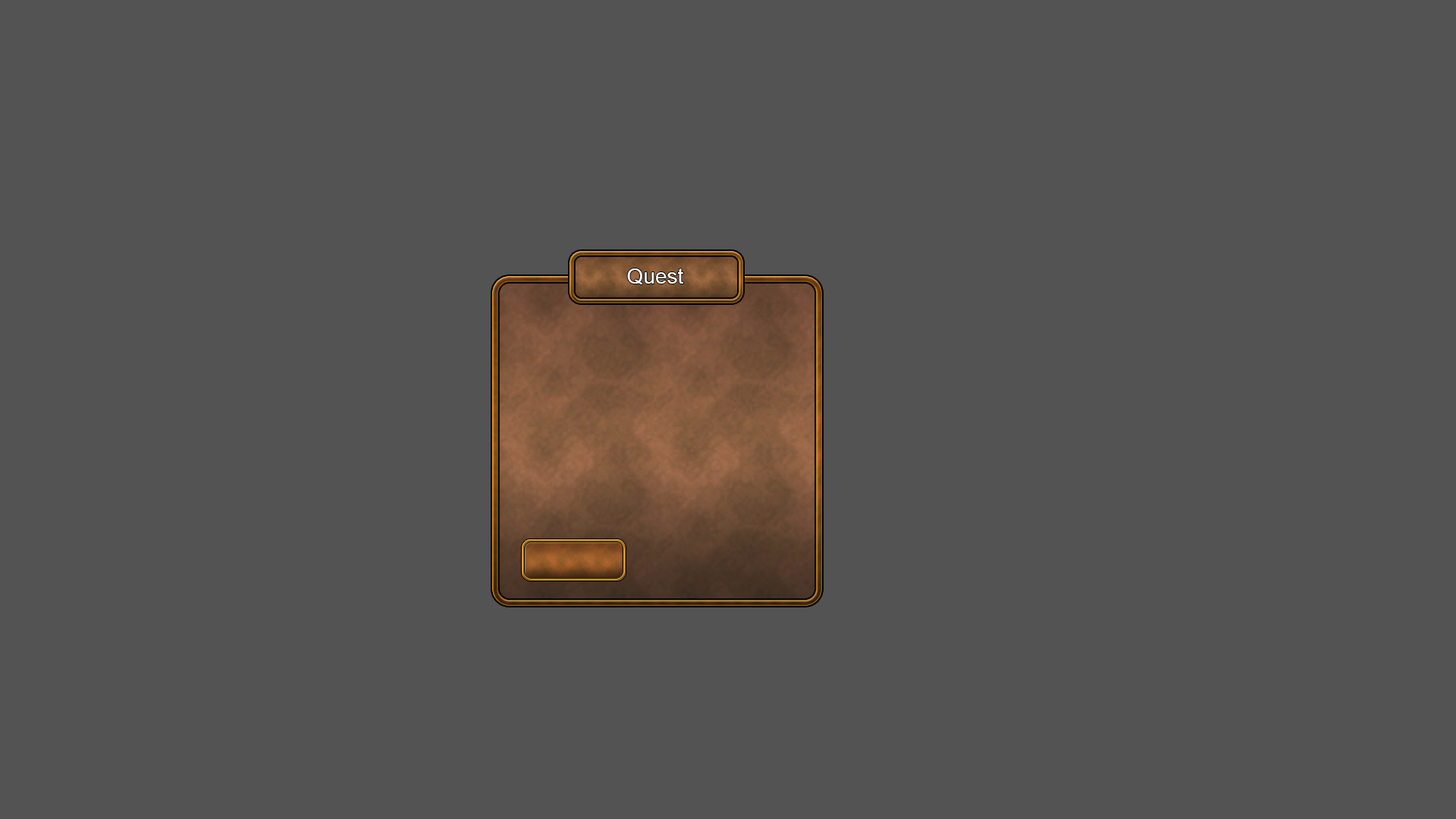
<style>
.page{position:relative;width:1456px;height:819px;background:#535353}
.page>*{position:absolute;margin:0}
.t1{font:21.2px "ArialMT";color:#ffffff}
</style>
<div class="page">
<p class="t1" style="left:627px;top:268px;width:56px;height:16px">Quest</p>
</div>
